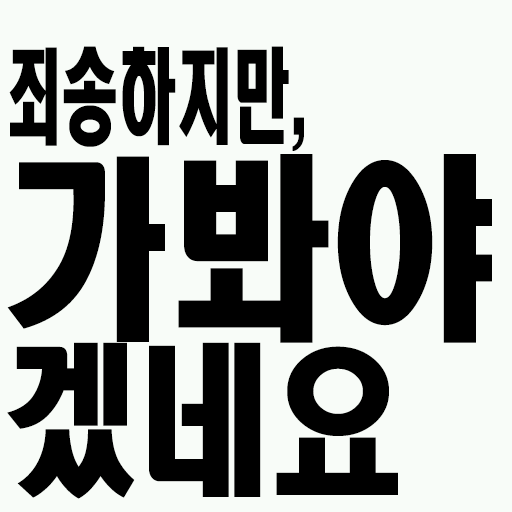
<style>
.page{position:relative;width:512px;height:512px;background:#f8fcf8}
.page>*{position:absolute;margin:0}
.t1{font:102.6px "HeadlineR-HM";color:#000000;scale:0.56 1}
.t2{font:196.2px "HeadlineR-HM";color:#000000;scale:0.83 1}
.t3{font:160.2px "HeadlineR-HM";color:#000000;scale:0.83 1}
</style>
<div class="page">
<p class="t1" style="left:9px;top:46px;width:295px;height:105px">죄송하지만,</p>
<p class="t2" style="left:7px;top:154px;width:485px;height:189px">가봐야</p>
<p class="t3" style="left:7px;top:342px;width:391px;height:157px">겠네요</p>
</div>
